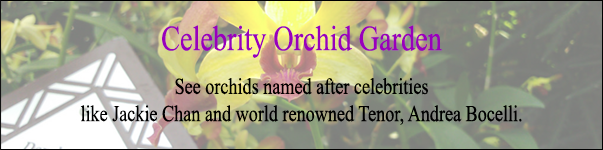
<style>
.page{position:relative;width:603px;height:150px}
.page>*{position:absolute;margin:0}
.t1{font:35.3px "TimesNewRomanPSMT";color:#9900bb;scale:0.8 1}
.t2{font:22.7px "TimesNewRomanPSMT";color:#000000;scale:0.8 1}
</style>
<div class="page">
<p class="t1" style="left:162px;top:25px;width:280px;height:33px">Celebrity Orchid Garden</p>
<p class="t2" style="left:80px;top:78px;width:442px;height:47px;text-align:center">See orchids named after celebrities<br>like Jackie Chan and world renowned Tenor, Andrea Bocelli.</p>
</div>
